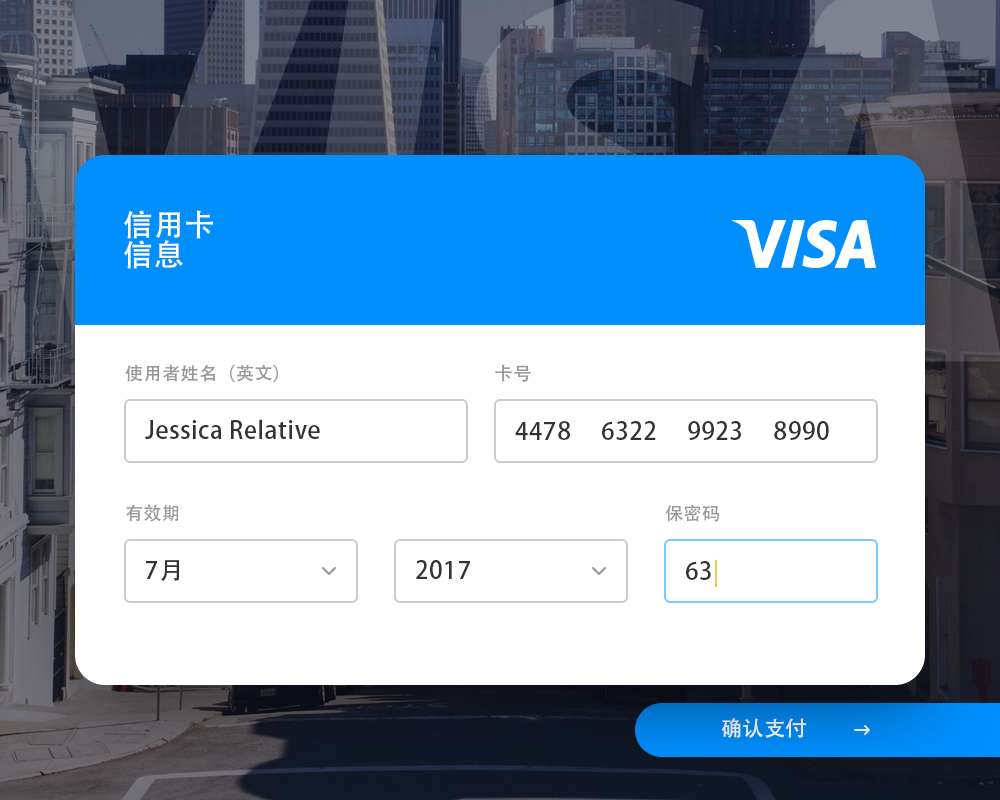
<style>
.page{position:relative;width:1000px;height:800px;background:#ffffff}
.page>*{position:absolute;margin:0}
.t1{font:30px/30px "AdobeHeitiStd-Regular";letter-spacing:0.025em;color:#ffffff;text-transform:uppercase}
.t2{font:18px "AdobeHeitiStd-Regular";letter-spacing:0.025em;color:#999999;text-transform:uppercase}
.t3{font:24px "AdobeHeitiStd-Regular";letter-spacing:0.025em;color:#343232}
.t4{font:24px "AdobeHeitiStd-Regular";letter-spacing:0.025em;color:#f8c856}
.t5{font:21px "AdobeHeitiStd-Regular";letter-spacing:0.025em;color:#e2e2e2;text-transform:uppercase}
</style>
<div class="page">
<p class="t1" style="left:124px;top:210px;width:89px;height:59px">信用卡 <br>信息</p>
<p class="t2" style="left:125px;top:364px;width:153px;height:18px">使用者姓名（英文）</p>
<p class="t2" style="left:495px;top:364px;width:36px;height:18px">卡号</p>
<p class="t3" style="left:145px;top:419px;width:175px;height:20px">Jessica Relative</p>
<p class="t3" style="left:515px;top:421px;width:314px;height:19px">4478     6322     9923     8990</p>
<p class="t2" style="left:126px;top:504px;width:53px;height:18px">有效期</p>
<p class="t2" style="left:665px;top:504px;width:54px;height:18px">保密码</p>
<p class="t3" style="left:146px;top:560px;width:33px;height:21px">7月</p>
<p class="t3" style="left:416px;top:560px;width:54px;height:19px">2017</p>
<p class="t3" style="left:686px;top:559px;width:31px;height:28px">63<span class="t4">|</span></p>
<p class="t5" style="left:721px;top:718px;width:86px;height:20px">确认支付</p>
</div>
